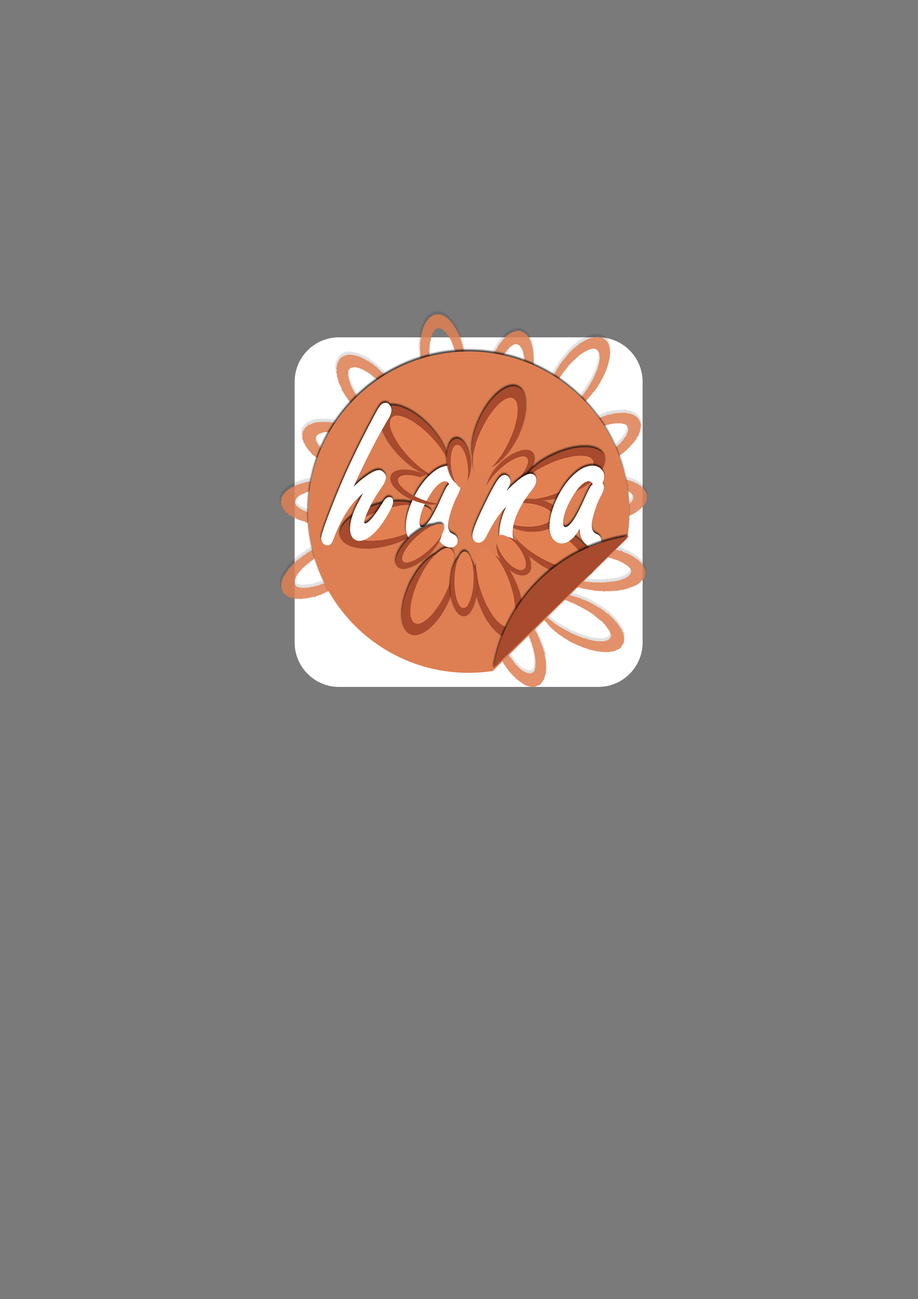
<style>
.page{position:relative;width:918px;height:1299px;background:#7a7a7a}
.page>*{position:absolute;margin:0}
.t1{font:233.7px "FreestyleScript-Regular";letter-spacing:0.05em;color:#ffffff;font-weight:bold;scale:0.92 1}
</style>
<div class="page">
<p class="t1" style="left:321px;top:402px;width:284px;height:153px">hana</p>
</div>
